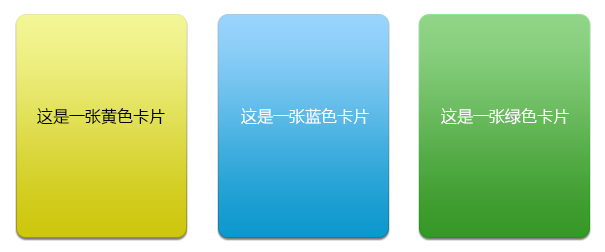
<style>
.page{position:relative;width:605px;height:252px;background:#ffffff}
.page>*{position:absolute;margin:0}
.t1{font:16px "MicrosoftYaHei";color:#000000}
.t2{font:16px "MicrosoftYaHei";color:#ffffff}
</style>
<div class="page">
<p class="t1" style="left:37px;top:108px;width:128px;height:17px">这是一张黄色卡片</p>
<p class="t2" style="left:241px;top:108px;width:128px;height:17px">这是一张蓝色卡片</p>
<p class="t2" style="left:441px;top:108px;width:128px;height:17px">这是一张绿色卡片</p>
</div>
